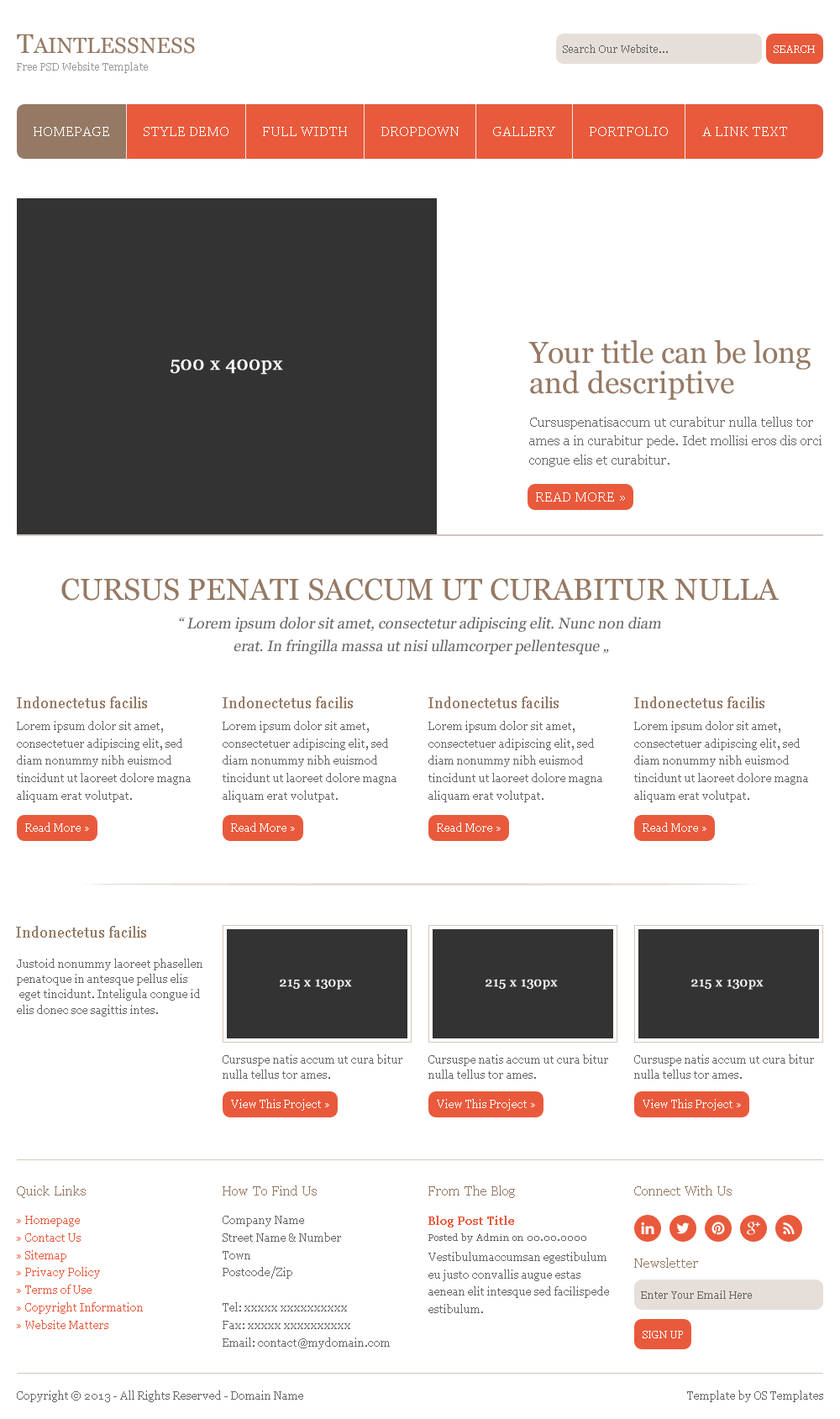
<style>
.page{position:relative;width:840px;height:1419px;background:#ffffff}
.page>*{position:absolute;margin:0}
.t1{font:21.8px "Georgia";color:#947964}
.t2{font:26.9px "Georgia";color:#947964}
.t3{font:10.1px "Georgia";color:#666666}
.t4{font:10.1px "Georgia";color:#ffffff}
.t5{font:10.1px "Georgia";color:#999999}
.t6{font:13.4px "Georgia";color:#ffffff}
.t7{font:30.2px/30.2px "Georgia";color:#957964}
.t8{font:19px "Georgia";color:#f8f8f8;font-weight:bold}
.t9{font:13.4px/18.8px "Georgia";color:#666666}
.t10{font:30.2px "Georgia";color:#957964}
.t11{font:15.1px/22.7px "Georgia";color:#666666;font-style:italic}
.t12{font:15.1px/15.1px "Georgia";color:#666666;font-style:italic}
.t13{font:15.1px "Georgia";color:#947964}
.t14{font:10.9px/17.5px "Georgia";color:#666666}
.t15{font:10.9px "Georgia";color:#ffffff}
.t16{font:10.9px/15.3px "Georgia";color:#666666}
.t17{font:13.1px "Georgia";color:#f8f8f8;font-weight:bold}
.t18{font:13.4px "Georgia";color:#957964}
.t19{font:13.4px "Georgia";color:#947964}
.t20{font:10.9px/17.5px "Georgia";color:#e95a3c}
.t21{font:10.9px "Georgia";color:#e95a3c;font-weight:bold}
.t22{font:9.2px "Georgia";color:#666666}
.t23{font:10.9px "Georgia";color:#666666}
</style>
<div class="page">
<p class="t1" style="left:17px;top:34px;width:178px;height:20px"><span class="t2">T</span>AINTLESSNESS</p>
<p class="t3" style="left:563px;top:45px;width:105px;height:8px">Search Our Website...</p>
<p class="t4" style="left:774px;top:45px;width:41px;height:8px">SEARCH</p>
<p class="t5" style="left:17px;top:62px;width:131px;height:11px">Free PSD Website Template</p>
<p class="t6" style="left:34px;top:127px;width:75px;height:9px">HOMEPAGE</p>
<p class="t6" style="left:144px;top:127px;width:85px;height:9px">STYLE DEMO</p>
<p class="t6" style="left:263px;top:127px;width:84px;height:9px">FULL WIDTH</p>
<p class="t6" style="left:381px;top:127px;width:78px;height:9px">DROPDOWN</p>
<p class="t6" style="left:493px;top:127px;width:62px;height:9px">GALLERY</p>
<p class="t6" style="left:590px;top:127px;width:78px;height:9px">PORTFOLIO</p>
<p class="t6" style="left:702px;top:127px;width:85px;height:9px">A LINK TEXT</p>
<p class="t7" style="left:529px;top:339px;width:282px;height:61px">Your title can be long <br>and descriptive</p>
<p class="t8" style="left:171px;top:359px;width:112px;height:16px">500 x 400px</p>
<p class="t9" style="left:529px;top:417px;width:293px;height:50px">Cursuspenatisaccum ut curabitur nulla tellus tor ames a in curabitur pede. Idet mollisi eros dis orci congue elis et curabitur.</p>
<p class="t6" style="left:536px;top:492px;width:89px;height:10px">READ MORE »</p>
<p class="t10" style="left:61px;top:578px;width:718px;height:23px">CURSUS PENATI SACCUM UT CURABITUR NULLA</p>
<p class="t11" style="left:179px;top:617px;width:482px;height:38px;text-align:center"><span class="t12">“</span> Lorem ipsum dolor sit amet, consectetur adipiscing elit. Nunc non diam <br>erat. In fringilla massa ut nisi ullamcorper pellentesque „</p>
<p class="t13" style="left:17px;top:697px;width:130px;height:11px">Indonectetus facilis</p>
<p class="t13" style="left:223px;top:697px;width:130px;height:11px">Indonectetus facilis</p>
<p class="t13" style="left:429px;top:697px;width:130px;height:11px">Indonectetus facilis</p>
<p class="t13" style="left:634px;top:697px;width:131px;height:11px">Indonectetus facilis</p>
<p class="t14" style="left:17px;top:721px;width:174px;height:81px">Lorem ipsum dolor sit amet, consectetuer adipiscing elit, sed diam nonummy nibh euismod tincidunt ut laoreet dolore magna aliquam erat volutpat.</p>
<p class="t14" style="left:223px;top:721px;width:174px;height:81px">Lorem ipsum dolor sit amet, consectetuer adipiscing elit, sed diam nonummy nibh euismod tincidunt ut laoreet dolore magna aliquam erat volutpat.</p>
<p class="t14" style="left:429px;top:721px;width:173px;height:81px">Lorem ipsum dolor sit amet, consectetuer adipiscing elit, sed diam nonummy nibh euismod tincidunt ut laoreet dolore magna aliquam erat volutpat.</p>
<p class="t14" style="left:634px;top:721px;width:174px;height:81px">Lorem ipsum dolor sit amet, consectetuer adipiscing elit, sed diam nonummy nibh euismod tincidunt ut laoreet dolore magna aliquam erat volutpat.</p>
<p class="t15" style="left:25px;top:823px;width:64px;height:9px">Read More »</p>
<p class="t15" style="left:231px;top:823px;width:64px;height:9px">Read More »</p>
<p class="t15" style="left:437px;top:823px;width:64px;height:9px">Read More »</p>
<p class="t15" style="left:643px;top:823px;width:64px;height:9px">Read More »</p>
<p class="t13" style="left:16px;top:926px;width:130px;height:12px">Indonectetus facilis</p>
<p class="t16" style="left:17px;top:959px;width:185px;height:58px">Justoid nonummy laoreet phasellen<br>penatoque in antesque pellus elis<br> eget tincidunt. Inteligula congue id <br>elis donec sce sagittis intes.</p>
<p class="t17" style="left:280px;top:979px;width:72px;height:11px">215 x 130px</p>
<p class="t17" style="left:486px;top:979px;width:72px;height:11px">215 x 130px</p>
<p class="t17" style="left:692px;top:979px;width:72px;height:11px">215 x 130px</p>
<p class="t16" style="left:223px;top:1054px;width:179px;height:25px">Cursuspe natis accum ut cura bitur nulla tellus tor ames.</p>
<p class="t16" style="left:429px;top:1054px;width:179px;height:25px">Cursuspe natis accum ut cura bitur nulla tellus tor ames.</p>
<p class="t16" style="left:634px;top:1054px;width:180px;height:25px">Cursuspe natis accum ut cura bitur nulla tellus tor ames.</p>
<p class="t15" style="left:231px;top:1099px;width:98px;height:12px">View This Project »</p>
<p class="t15" style="left:437px;top:1099px;width:98px;height:12px">View This Project »</p>
<p class="t15" style="left:643px;top:1099px;width:98px;height:12px">View This Project »</p>
<p class="t18" style="left:17px;top:1186px;width:69px;height:12px">Quick Links</p>
<p class="t18" style="left:223px;top:1186px;width:94px;height:10px">How To Find Us</p>
<p class="t19" style="left:429px;top:1186px;width:86px;height:12px">From The Blog</p>
<p class="t19" style="left:634px;top:1186px;width:98px;height:10px">Connect With Us</p>
<p class="t20" style="left:17px;top:1216px;width:126px;height:113px">» Homepage<br>» Contact Us<br>» Sitemap<br>» Privacy Policy<br>» Terms of Use<br>» Copyright Information<br>» Website Matters</p>
<p class="t14" style="left:223px;top:1216px;width:167px;height:133px">Company Name<br>Street Name &amp; Number<br>Town<br>Postcode/Zip<br><br>Tel: xxxxx xxxxxxxxxx<br>Fax: xxxxx xxxxxxxxxx<br>Email: contact@mydomain.com</p>
<p class="t21" style="left:429px;top:1216px;width:85px;height:12px">Blog Post Title</p>
<p class="t22" style="left:429px;top:1233px;width:157px;height:10px">Posted by Admin on 00.00.0000</p>
<p class="t14" style="left:429px;top:1252px;width:180px;height:61px">Vestibulumaccumsan egestibulum eu justo convallis augue estas aenean elit intesque sed facilispede estibulum.</p>
<p class="t19" style="left:634px;top:1258px;width:64px;height:10px">Newsletter</p>
<p class="t3" style="left:641px;top:1291px;width:111px;height:8px">Enter Your Email Here</p>
<p class="t4" style="left:643px;top:1331px;width:40px;height:7px">SIGN UP</p>
<p class="t23" style="left:17px;top:1391px;width:286px;height:11px">Copyright © 2013 - All Rights Reserved - Domain Name</p>
<p class="t23" style="left:687px;top:1391px;width:136px;height:11px">Template by OS Templates</p>
</div>
